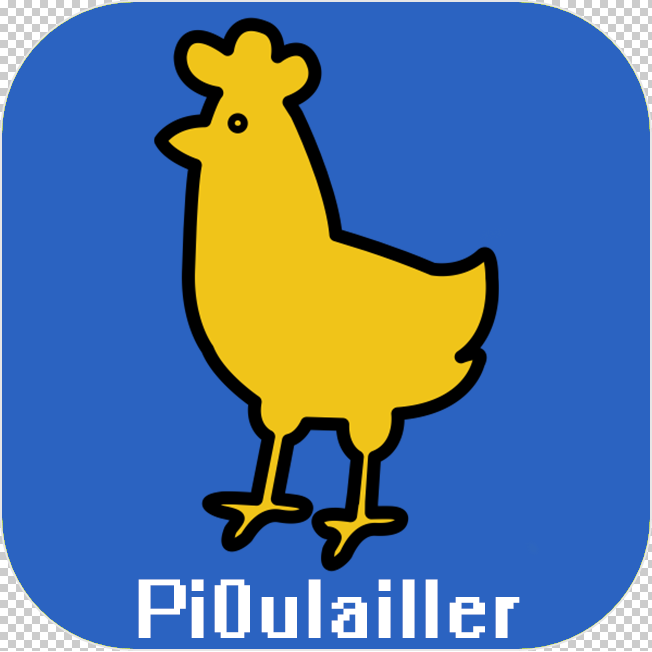
<style>
.page{position:relative;width:652px;height:652px;background:#2b63c1}
.page>*{position:absolute;margin:0}
.t1{font:75px "System";color:#ffffff}
</style>
<div class="page">
<p class="t1" style="left:138px;top:579px;width:382px;height:59px">Pi0ulailler</p>
</div>
